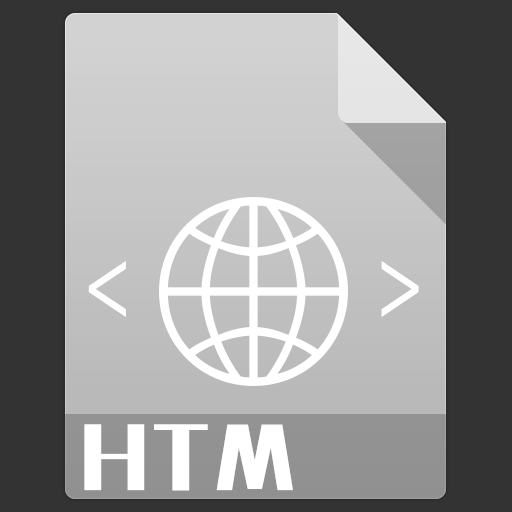
<style>
.page{position:relative;width:512px;height:512px;background:#333333}
.page>*{position:absolute;margin:0}
.t1{font:99px "SourceCodeProYaHeiHybrid";letter-spacing:0.07em;color:#ffffff}
.t2{font:72px "MFLiHei_Noncommercial-Regular";letter-spacing:0.07em;color:#ffffff}
</style>
<div class="page">
<p class="t1" style="left:88px;top:261px;width:331px;height:56px">&lt;    &gt;</p>
<p class="t2" style="left:84px;top:424px;width:209px;height:67px">HTM</p>
</div>
